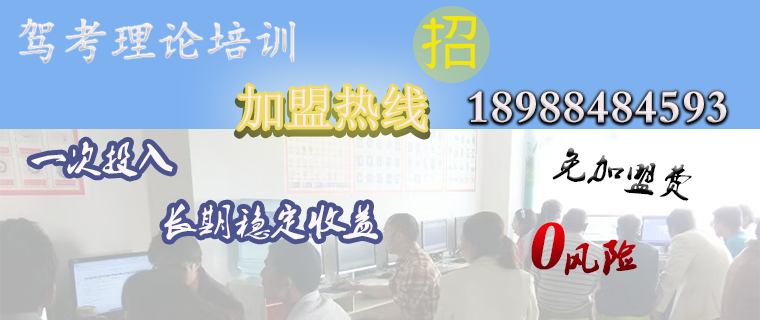
<style>
.page{position:relative;width:760px;height:320px;background:#7eb1f0}
.page>*{position:absolute;margin:0}
.t1{font:48px "¿¬Ìå";color:#f6ebed}
.t2{font:48px "SimSun";color:#f6ebed}
.t3{font:48px "2.0-";color:#f6ebed}
.t4{font:36px "2.0-"}
.t5{font:36px "2.0-";font-weight:bold}
.t6{font:72px "2.0-";font-weight:bold;font-style:italic}
</style>
<div class="page">
<p class="t1" style="left:19px;top:19px;width:276px;height:44px">驾考理论培训</p>
<p class="t2" style="left:238px;top:85px;width:188px;height:45px">加盟热线</p>
<p class="t3" style="left:469px;top:91px;width:258px;height:32px">18988484593</p>
<p class="t4" style="left:552px;top:147px;width:140px;height:54px;rotate:8deg">免加盟费</p>
<p class="t5" style="left:531px;top:222px;width:106px;height:54px"><span class="t6">0</span>风险</p>
</div>
